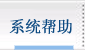
<style>
.page{position:relative;width:85px;height:50px}
.page>*{position:absolute;margin:0}
.t1{font:16px "SimSun";letter-spacing:-0.025em;color:#0c4981;text-transform:uppercase;font-weight:bold}
</style>
<div class="page">
<p class="t1" style="left:9px;top:19px;width:63px;height:15px">系统帮助</p>
</div>
